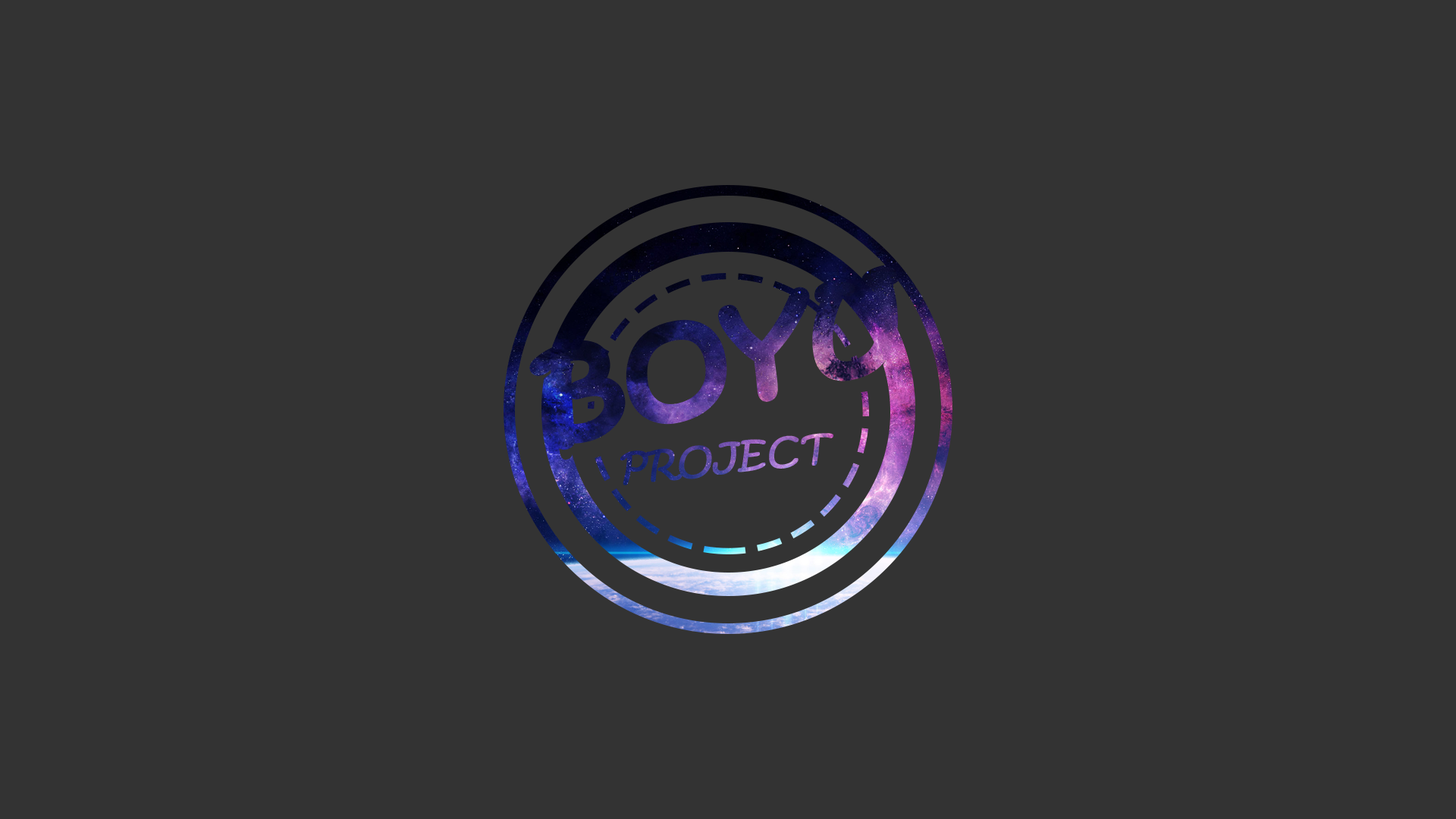
<style>
.page{position:relative;width:1456px;height:819px;background:#333333}
.page>*{position:absolute;margin:0}
.t1{font:100.7px "KristenITC-Regular";font-weight:bold;font-style:italic;scale:1.14 1}
.t2{font:35.4px "KristenITC-Regular";font-weight:bold;font-style:italic;scale:1.1 1}
</style>
<div class="page">
<p class="t1" style="left:533px;top:268px;width:363px;height:179px;rotate:-14deg">BOYU</p>
<p class="t2" style="left:620px;top:433px;width:213px;height:52px;rotate:-6deg">PROJECT</p>
</div>
